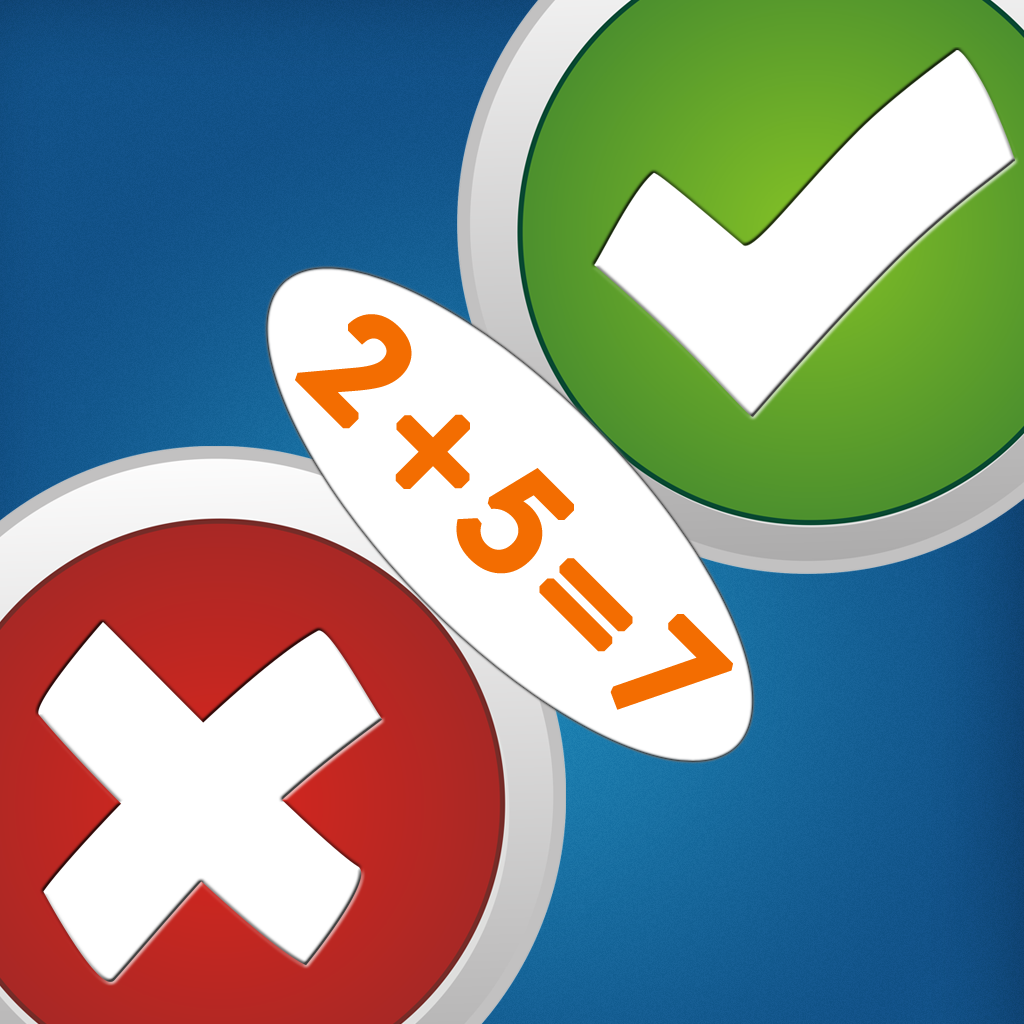
<style>
.page{position:relative;width:1024px;height:1024px;background:#ffffff}
.page>*{position:absolute;margin:0}
.t1{font:142.2px "FuturaBT-Medium";letter-spacing:0.016em;color:#f36d01;font-weight:bold}
</style>
<div class="page">
<p class="t1" style="left:295px;top:314px;width:438px;height:396px;rotate:45deg">2+5=7</p>
</div>
